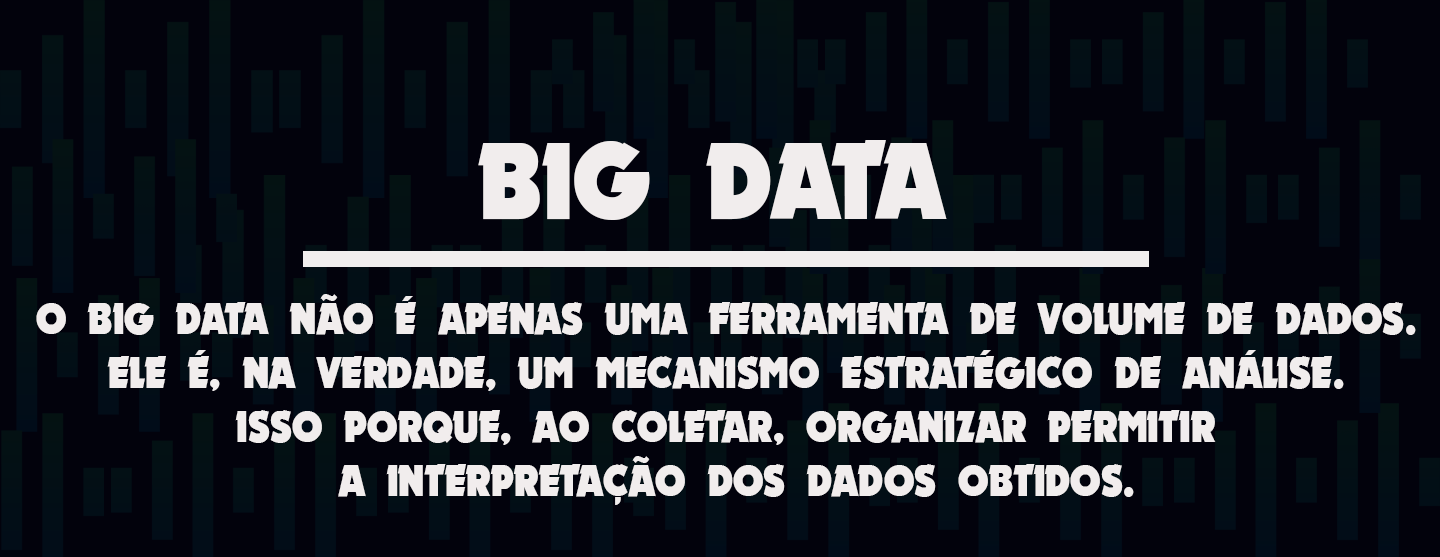
<style>
.page{position:relative;width:1440px;height:557px;background:#02020c}
.page>*{position:absolute;margin:0}
.t1{font:111.2px "Nougat-ExtraBlack";color:#f1eded;scale:0.94 1}
.t2{font:45.1px "Nougat-ExtraBlack";color:#f1eded;text-transform:uppercase;scale:0.89 1}
</style>
<div class="page">
<p class="t1" style="left:478px;top:140px;width:469px;height:80px">BIG DATA</p>
<p class="t2" style="left:36px;top:294px;width:1380px;height:211px;text-align:center">O big data não é apenas uma ferramenta de volume de dados. <br>Ele é, na verdade, um mecanismo estratégico de análise. <br>Isso porque, ao coletar, organizar permitir <br>a interpretação dos dados obtidos.</p>
</div>
